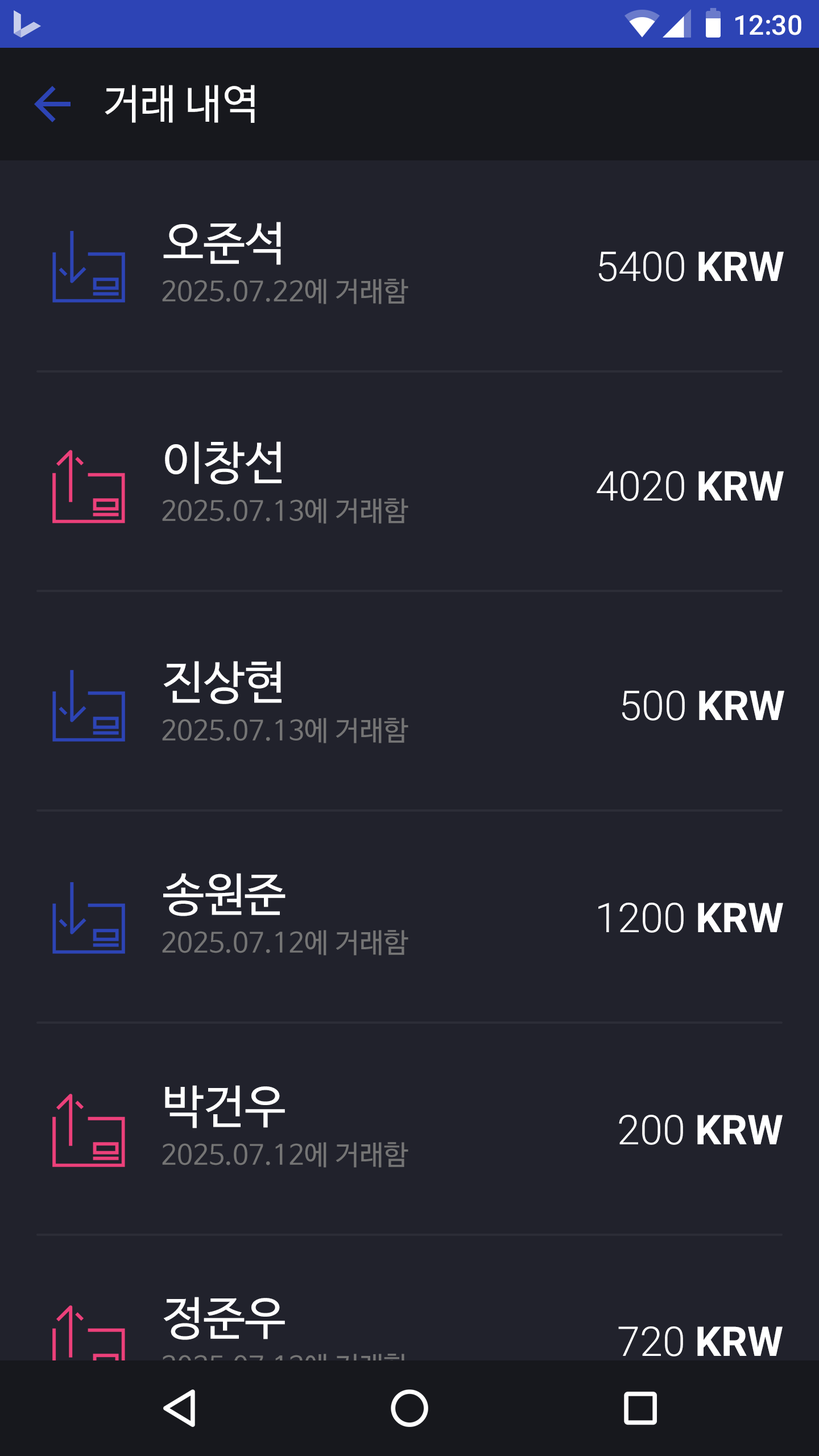
<style>
.page{position:relative;width:819px;height:1456px;background:#21222c}
.page>*{position:absolute;margin:0}
.t1{font:27.3px "Roboto-Medium";color:#ffffff}
.t2{font:40.9px "NanumBarunGothic";color:#ffffff}
.t3{font:46.1px "NanumBarunGothic";color:#ffffff}
.t4{font:40.9px "Roboto-Light";color:#ffffff}
.t5{font:40.9px "Roboto-Bold";color:#ffffff}
.t6{font:27.3px "NanumBarunGothic";color:#757575}
.t7{font:27.3px "NanumBarunGothic";color:#17181d}
</style>
<div class="page">
<p class="t1" style="left:735px;top:15px;width:66px;height:20px">12:30</p>
<p class="t2" style="left:105px;top:85px;width:150px;height:38px">거래 내역</p>
<p class="t3" style="left:163px;top:222px;width:118px;height:43px">오준석</p>
<p class="t4" style="left:599px;top:251px;width:185px;height:31px">5400 <span class="t5">KRW</span></p>
<p class="t6" style="left:162px;top:279px;width:246px;height:25px">2025.07.22에 거래함</p>
<p class="t3" style="left:165px;top:441px;width:117px;height:44px">이창선</p>
<p class="t4" style="left:597px;top:471px;width:187px;height:30px">4020 <span class="t5">KRW</span></p>
<p class="t6" style="left:162px;top:498px;width:246px;height:26px">2025.07.13에 거래함</p>
<p class="t3" style="left:163px;top:661px;width:119px;height:43px">진상현</p>
<p class="t4" style="left:622px;top:690px;width:162px;height:31px">500 <span class="t5">KRW</span></p>
<p class="t6" style="left:162px;top:718px;width:246px;height:25px">2025.07.13에 거래함</p>
<p class="t3" style="left:163px;top:873px;width:123px;height:43px">송원준</p>
<p class="t4" style="left:598px;top:903px;width:185px;height:30px">1200 <span class="t5">KRW</span></p>
<p class="t6" style="left:162px;top:930px;width:246px;height:25px">2025.07.12에 거래함</p>
<p class="t3" style="left:165px;top:1085px;width:120px;height:43px">박건우</p>
<p class="t4" style="left:619px;top:1115px;width:164px;height:30px">200 <span class="t5">KRW</span></p>
<p class="t6" style="left:162px;top:1142px;width:246px;height:26px">2025.07.12에 거래함</p>
<p class="t3" style="left:163px;top:1297px;width:122px;height:43px">정준우</p>
<p class="t4" style="left:618px;top:1326px;width:165px;height:30px">720 <span class="t5">KRW</span></p>
<p class="t7" style="left:162px;top:1354px;width:246px;height:25px">2025.07.12에 거래함</p>
</div>
